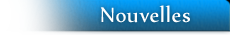
<style>
.page{position:relative;width:230px;height:35px}
.page>*{position:absolute;margin:0}
.t1{font:25px "Nyala-Regular";letter-spacing:0.025em;color:#ffffff}
</style>
<div class="page">
<p class="t1" style="left:100px;top:5px;width:90px;height:18px">Nouvelles</p>
</div>
